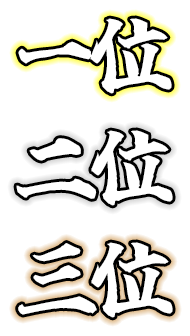
<style>
.page{position:relative;width:190px;height:336px;background:#ffffff}
.page>*{position:absolute;margin:0}
.t1{font:74.4px "Tamanegi-Kaisho-Geki-FreeVer-7";color:#ffffff}
</style>
<div class="page">
<p class="t1" style="left:18px;top:18px;width:154px;height:76px">一位</p>
<p class="t1" style="left:16px;top:130px;width:157px;height:76px">二位</p>
<p class="t1" style="left:18px;top:242px;width:155px;height:76px">三位</p>
</div>
